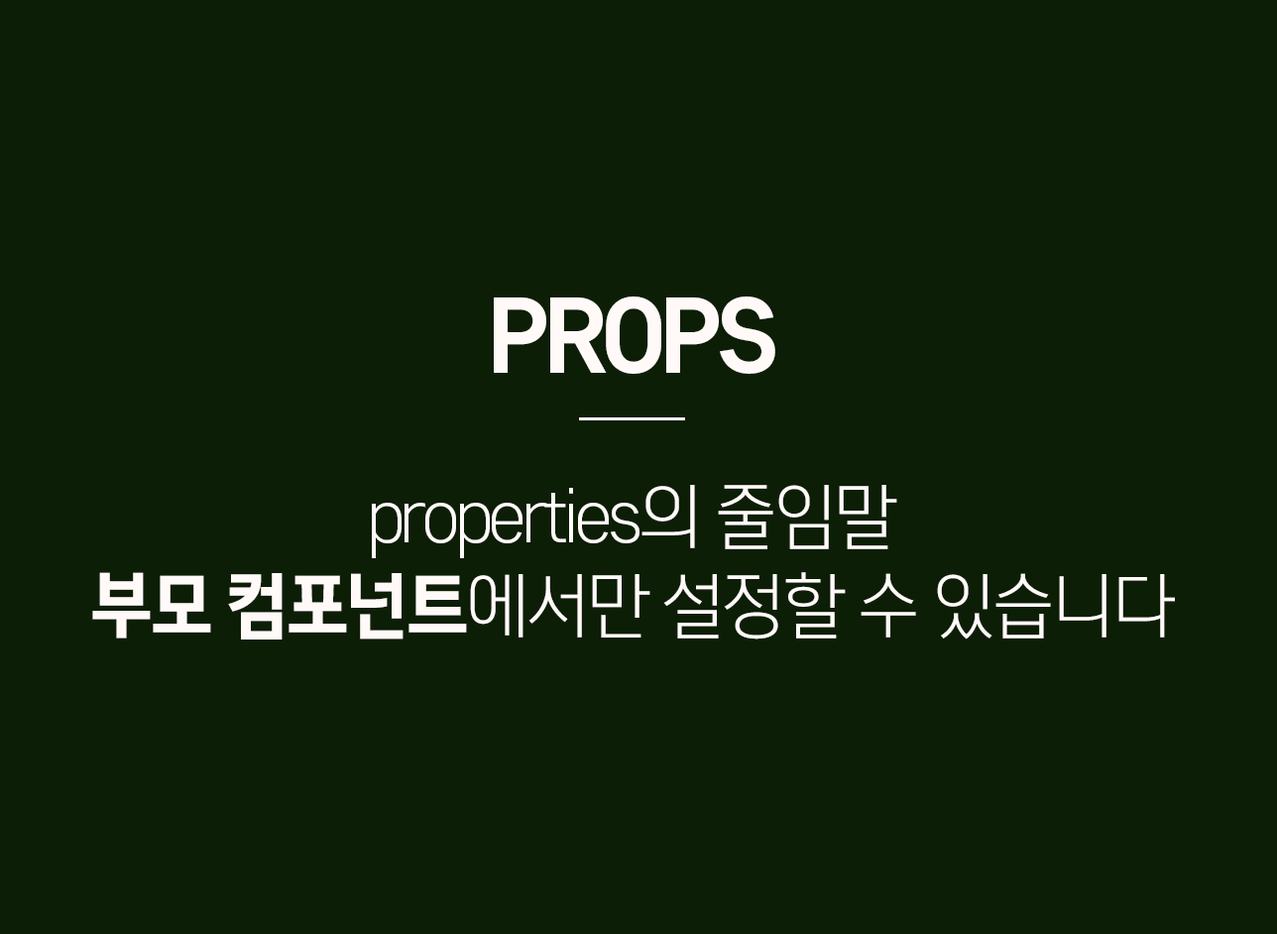
<style>
.page{position:relative;width:1277px;height:934px;background:#0d1e06}
.page>*{position:absolute;margin:0}
.t1{font:71.4px/89.2px "CoreGothicD-3Light";letter-spacing:-0.075em;color:#fffaf8}
.t2{font:98.1px/81.3px "CoreGothicD-7ExtraBold";letter-spacing:-0.075em;color:#fffaf8}
.t3{font:71.4px/89.2px "CoreGothicD-7ExtraBold";letter-spacing:-0.075em;color:#fffaf8}
</style>
<div class="page">
<p class="t1" style="left:92px;top:296px;width:1083px;height:343px;text-align:center"><span class="t2">PROPS<br><br></span>properties의 줄임말<br><span class="t3">부모 컴포넌트</span>에서만 설정할 수 있습니다</p>
</div>
